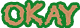
<style>
.page{position:relative;width:80px;height:28px;background:#10812a}
.page>*{position:absolute;margin:0}
.t1{font:30px "TOBACCO";color:#c4845a;font-weight:bold}
</style>
<div class="page">
<p class="t1" style="left:3px;top:2px;width:75px;height:24px">OKAY</p>
</div>
